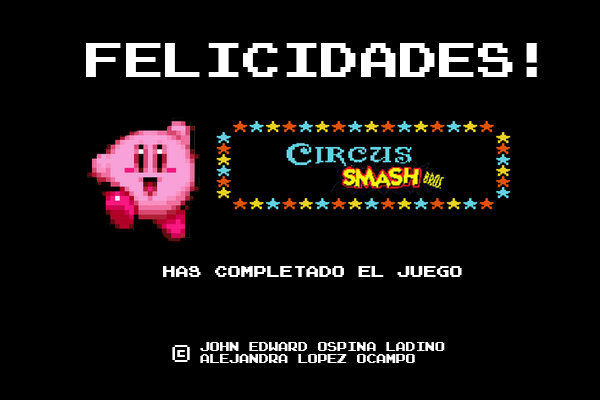
<style>
.page{position:relative;width:600px;height:400px;background:#000000}
.page>*{position:absolute;margin:0}
.t1{font:40px "ArcadeNormal";color:#ffffff}
.t2{font:40px "MyriadPro-Regular";color:#ffffff}
.t3{font:13.3px "ArcadeNormal";color:#ffffff}
.t4{font:10px "ArcadeNormal";color:#ffffff}
.t5{font:20px "ArcadeNormal";color:#ffffff}
</style>
<div class="page">
<p class="t1" style="left:86px;top:43px;width:451px;height:34px"><span class="t2"> </span>Felicidades!</p>
<p class="t3" style="left:163px;top:266px;width:299px;height:11px">Has completado el juego</p>
<p class="t4" style="left:200px;top:342px;width:245px;height:21px">John Edward Ospina Ladino<br>alejandra lopez ocampo</p>
<p class="t5" style="left:172px;top:345px;width:18px;height:17px">©</p>
</div>
